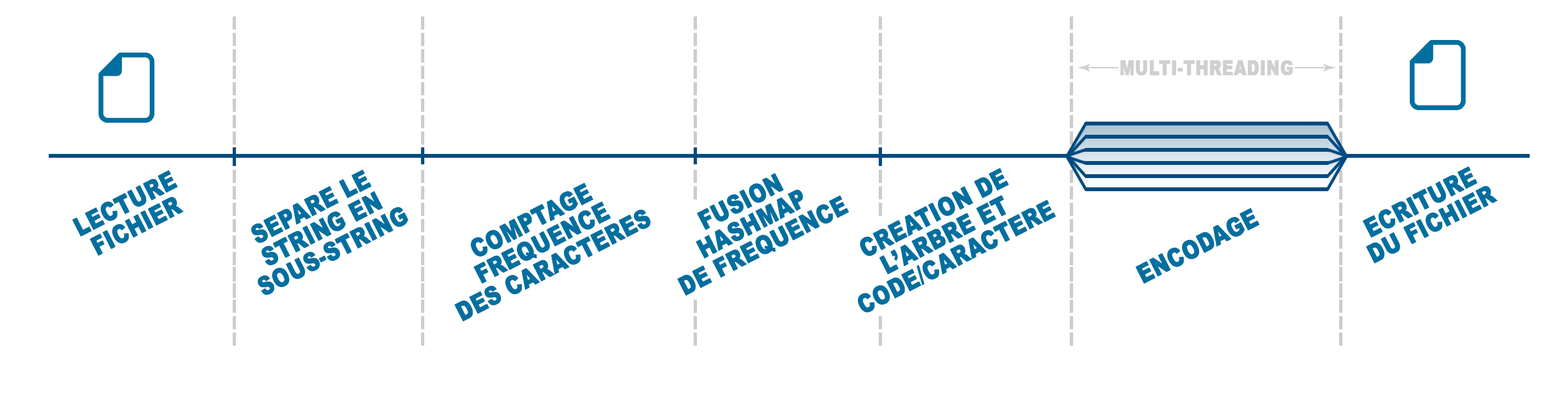
<style>
.page{position:relative;width:1568px;height:401px;background:#ffffff}
.page>*{position:absolute;margin:0}
.t1{font:20px "Arial-Black";color:#cfcfcf;text-transform:uppercase;font-weight:bold;scale:0.8 1}
.t2{font:25.7px "Arial-Black";color:#006f9f;text-transform:uppercase;font-weight:bold;scale:0.8 1}
</style>
<div class="page">
<p class="t1" style="left:1120px;top:60px;width:173px;height:16px">Multi-threading</p>
<p class="t2" style="left:72px;top:170px;width:111px;height:86px;text-align:center;rotate:-27deg">LECTURE<br>FICHIER</p>
<p class="t2" style="left:251px;top:169px;width:157px;height:126px;text-align:center;rotate:-27deg">SEPARE LE <br>STRING EN<br>SOUS-STRING</p>
<p class="t2" style="left:677px;top:173px;width:172px;height:123px;text-align:center;rotate:-27deg">Fusion <br>Hashmap<br>de frequence</p>
<p class="t2" style="left:858px;top:168px;width:198px;height:145px;text-align:center;rotate:-27deg">Creation de l’Arbre et <br>code/caractere</p>
<p class="t2" style="left:1363px;top:166px;width:134px;height:97px;text-align:center;rotate:-27deg">Ecriture<br>du fichier</p>
<p class="t2" style="left:454px;top:182px;width:197px;height:139px;text-align:center;rotate:-27deg">COMPTAGE<br>FREQuence<br>des caracteres</p>
<p class="t2" style="left:1135px;top:207px;width:125px;height:77px;rotate:-27deg">Encodage</p>
</div>
